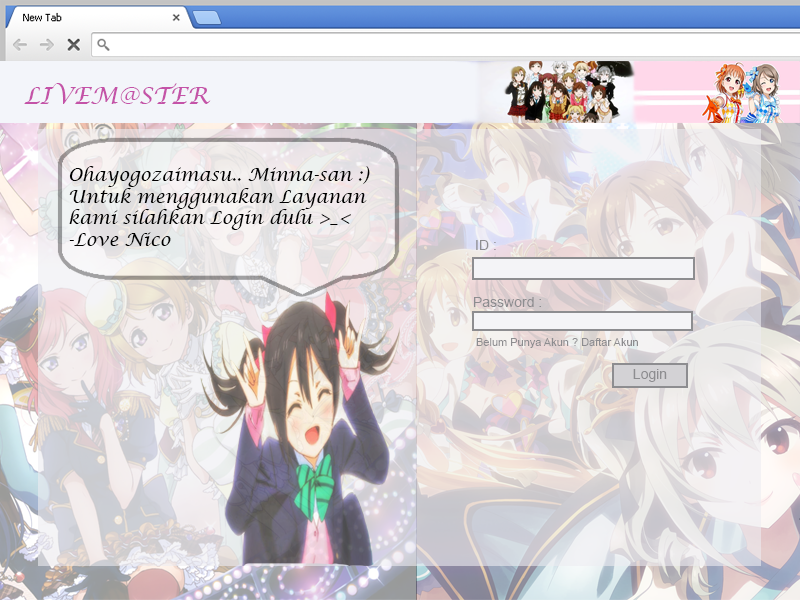
<style>
.page{position:relative;width:800px;height:600px}
.page>*{position:absolute;margin:0}
.t1{font:24px "LucidaCalligraphy-Italic";color:#c453a8}
.t2{font:18px "LucidaCalligraphy-Italic";color:#000000}
.t3{font:14px "ArialMT";color:#8d8d90}
.t4{font:11px "ArialMT";color:#8d8d90}
</style>
<div class="page">
<p class="t1" style="left:24px;top:83px;width:187px;height:21px">LIVEM@STER</p>
<p class="t2" style="left:69px;top:166px;width:301px;height:80px">Ohayogozaimasu.. Minna-san :)<br>Untuk menggunakan Layanan<br>kami silahkan Login dulu &gt;_&lt;<br>-Love Nico</p>
<p class="t3" style="left:476px;top:240px;width:20px;height:10px">ID :</p>
<p class="t3" style="left:474px;top:297px;width:67px;height:10px">Password :</p>
<p class="t4" style="left:476px;top:338px;width:162px;height:10px">Belum Punya Akun ? Daftar Akun</p>
<p class="t3" style="left:633px;top:369px;width:34px;height:13px">Login</p>
</div>
